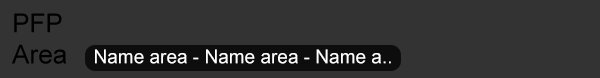
<style>
.page{position:relative;width:600px;height:78px;background:#333333}
.page>*{position:absolute;margin:0}
.t1{font:26px "ArialMT";color:#000000}
.t2{font:19px "ArialMT";color:#ffffff}
</style>
<div class="page">
<p class="t1" style="left:12px;top:13px;width:55px;height:51px">PFP<br>Area</p>
<p class="t2" style="left:95px;top:49px;width:296px;height:15px">Name area - Name area - Name a..</p>
</div>
